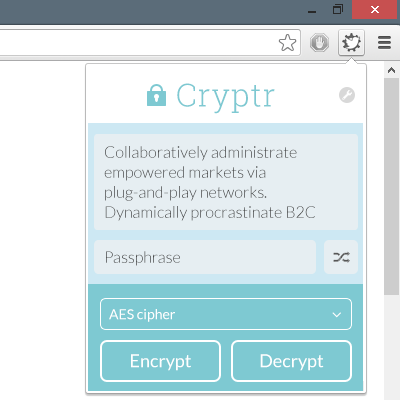
<style>
.page{position:relative;width:400px;height:400px;background:#ffffff}
.page>*{position:absolute;margin:0}
.t1{font:32px "RobotoSlab-Light";letter-spacing:0.025em;color:#7ec9d2}
.t2{font:16px/20px "Lato-Light"}
.t3{font:16px "Lato-Light"}
.t4{font:14px "Lato-Regular";color:#ffffff}
.t5{font:16px "Consolas";color:#ffffff;scale:0.82 1}
.t6{font:18px "Lato-Regular";color:#ffffff}
</style>
<div class="page">
<p class="t1" style="left:177px;top:83px;width:98px;height:31px">Cryptr</p>
<p class="t2" style="left:104px;top:146px;width:211px;height:75px">Collaboratively administrate empowered markets via plug-and-play networks. Dynamically procrastinate B2C users after installed base benefits.</p>
<p class="t3" style="left:106px;top:251px;width:74px;height:15px">Passphrase</p>
<p class="t4" style="left:109px;top:309px;width:66px;height:13px">AES cipher</p>
<p class="t5" style="left:332px;top:312px;width:9px;height:6px;rotate:90deg">&gt;</p>
<p class="t6" style="left:131px;top:354px;width:60px;height:17px">Encrypt</p>
<p class="t6" style="left:260px;top:354px;width:64px;height:17px">Decrypt</p>
</div>
